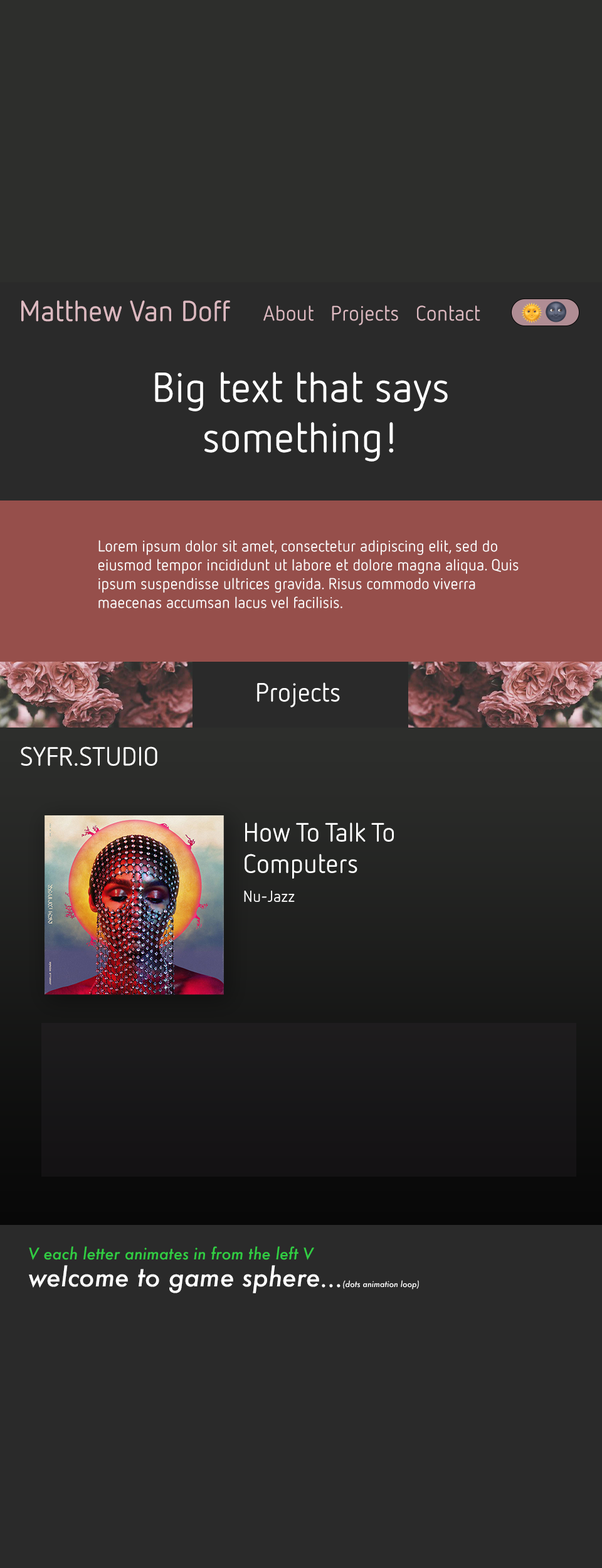
<style>
.page{position:relative;width:602px;height:1568px;background:#2a2a2a}
.page>*{position:absolute;margin:0}
.t1{font:28.7px "NettoOffc";color:#dcb9c0}
.t2{font:20.9px "NettoOffc";color:#dcb9c0}
.t3{font:41.8px "NettoOffc";color:#ffffff}
.t4{font:15.7px "NettoOffc";color:#ffffff}
.t5{font:26.1px "NettoOffc";color:#ffffff}
.t6{font:15.7px "Futura-MediumItalic";color:#31cd43}
.t7{font:25.6px "Futura-MediumItalic";color:#ffffff}
.t8{font:7.8px "Futura-MediumItalic";color:#ffffff}
.t9{font:23.6px "Futura-MediumItalic";color:#ffffff}
</style>
<div class="page">
<p class="t1" style="left:21px;top:300px;width:209px;height:22px">Matthew Van Doff</p>
<p class="t2" style="left:263px;top:305px;width:217px;height:21px">About   Projects   Contact</p>
<p class="t3" style="left:155px;top:372px;width:293px;height:90px;text-align:center">Big text that says something!</p>
<p class="t4" style="left:98px;top:540px;width:421px;height:68px">Lorem ipsum dolor sit amet, consectetur adipiscing elit, sed do eiusmod tempor incididunt ut labore et dolore magna aliqua. Quis ipsum suspendisse ultrices gravida. Risus commodo viverra maecenas accumsan lacus vel facilisis.</p>
<p class="t5" style="left:257px;top:682px;width:83px;height:25px">Projects</p>
<p class="t5" style="left:21px;top:746px;width:136px;height:20px">SYFR.STUDIO</p>
<p class="t5" style="left:245px;top:822px;width:149px;height:57px">How To Talk To Computers</p>
<p class="t4" style="left:244px;top:891px;width:51px;height:11px">Nu-Jazz</p>
<p class="t6" style="left:29px;top:1246px;width:285px;height:14px">V each letter animates in from the left V</p>
<p class="t7" style="left:29px;top:1265px;width:290px;height:28px">welcome to game sphere</p>
<p class="t8" style="left:322px;top:1280px;width:97px;height:10px"><span class="t9">...</span>(dots animation loop)</p>
</div>
